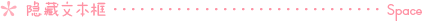
<style>
.page{position:relative;width:422px;height:21px;background:#ffffff}
.page>*{position:absolute;margin:0}
.t1{font:18px "¢è?";color:#ff93a5}
</style>
<div class="page">
<p class="t1" style="left:26px;top:1px;width:80px;height:16px">隐藏文本框</p>
</div>
